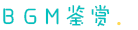
<style>
.page{position:relative;width:138px;height:30px;background:#ffffff}
.page>*{position:absolute;margin:0}
.t1{font:22px "BauhausITC";color:#02c1bf}
</style>
<div class="page">
<p class="t1" style="left:3px;top:4px;width:107px;height:23px">ＢＧＭ鉴赏</p>
</div>
